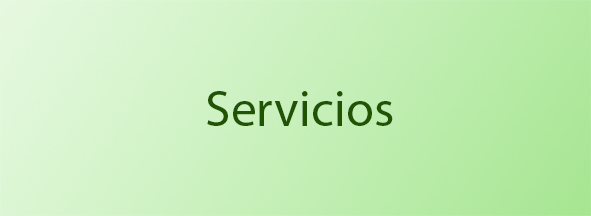
<style>
.page{position:relative;width:591px;height:216px}
.page>*{position:absolute;margin:0}
.t1{font:51.1px "MyriadPro-Regular";color:#205403}
</style>
<div class="page">
<p class="t1" style="left:207px;top:91px;width:186px;height:35px">Servicios</p>
</div>
